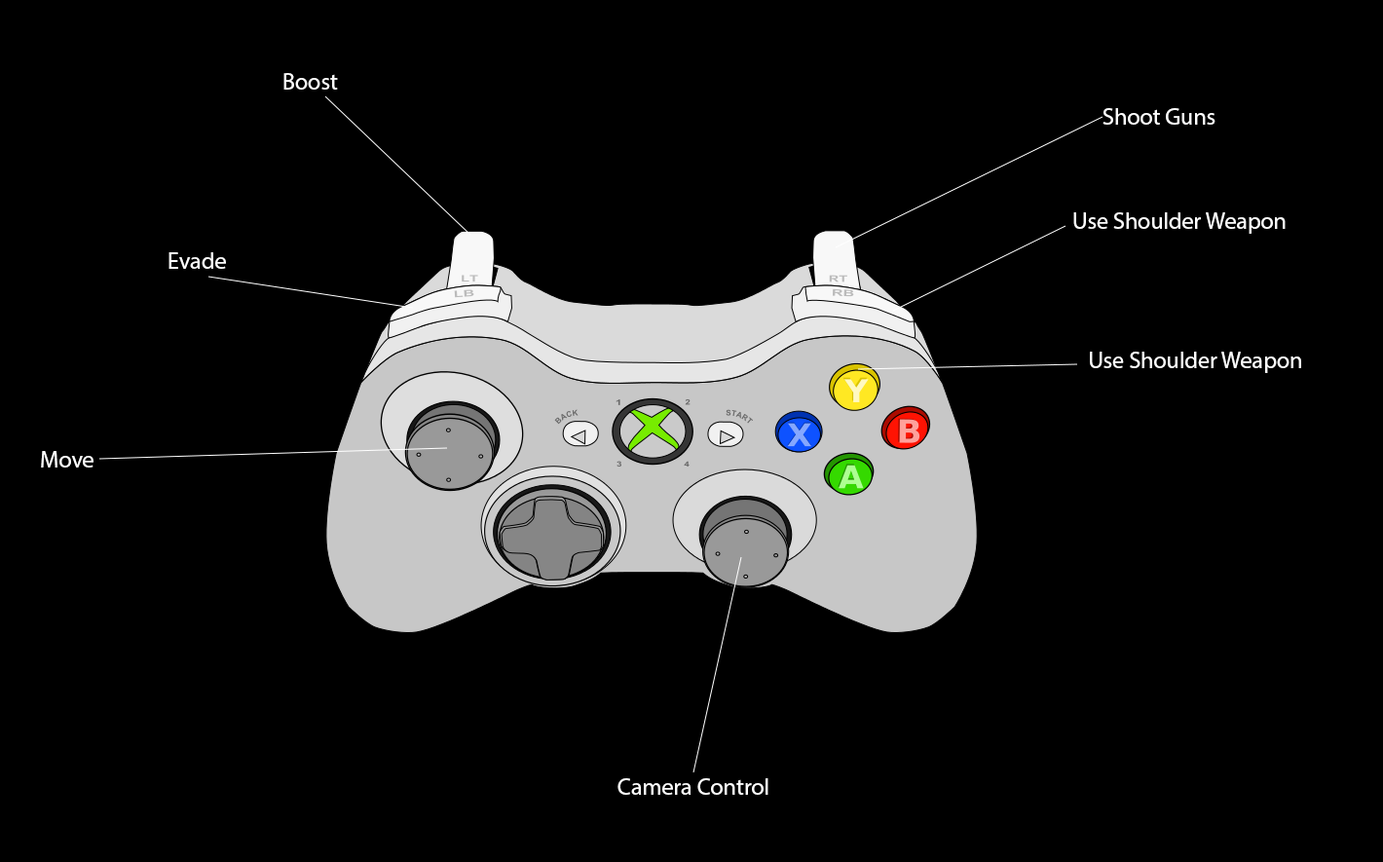
<style>
.page{position:relative;width:1383px;height:862px;background:#000000}
.page>*{position:absolute;margin:0}
.t1{font:23.4px "MyriadPro-Regular";color:#ffffff}
</style>
<div class="page">
<p class="t1" style="left:283px;top:73px;width:55px;height:17px">Boost</p>
<p class="t1" style="left:1103px;top:108px;width:113px;height:17px">Shoot Guns</p>
<p class="t1" style="left:1073px;top:212px;width:213px;height:22px">Use Shoulder Weapon</p>
<p class="t1" style="left:169px;top:252px;width:57px;height:17px">Evade</p>
<p class="t1" style="left:1090px;top:352px;width:211px;height:21px">Use Shoulder Weapon</p>
<p class="t1" style="left:41px;top:451px;width:53px;height:17px">Move</p>
<p class="t1" style="left:618px;top:778px;width:151px;height:17px">Camera Control</p>
</div>
